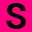
<style>
.page{position:relative;width:32px;height:32px;background:#ff0080}
.page>*{position:absolute;margin:0}
.t1{font:36px "Roboto-Bold";color:#000000}
</style>
<div class="page">
<p class="t1" style="left:6px;top:3px;width:20px;height:26px">S</p>
</div>
